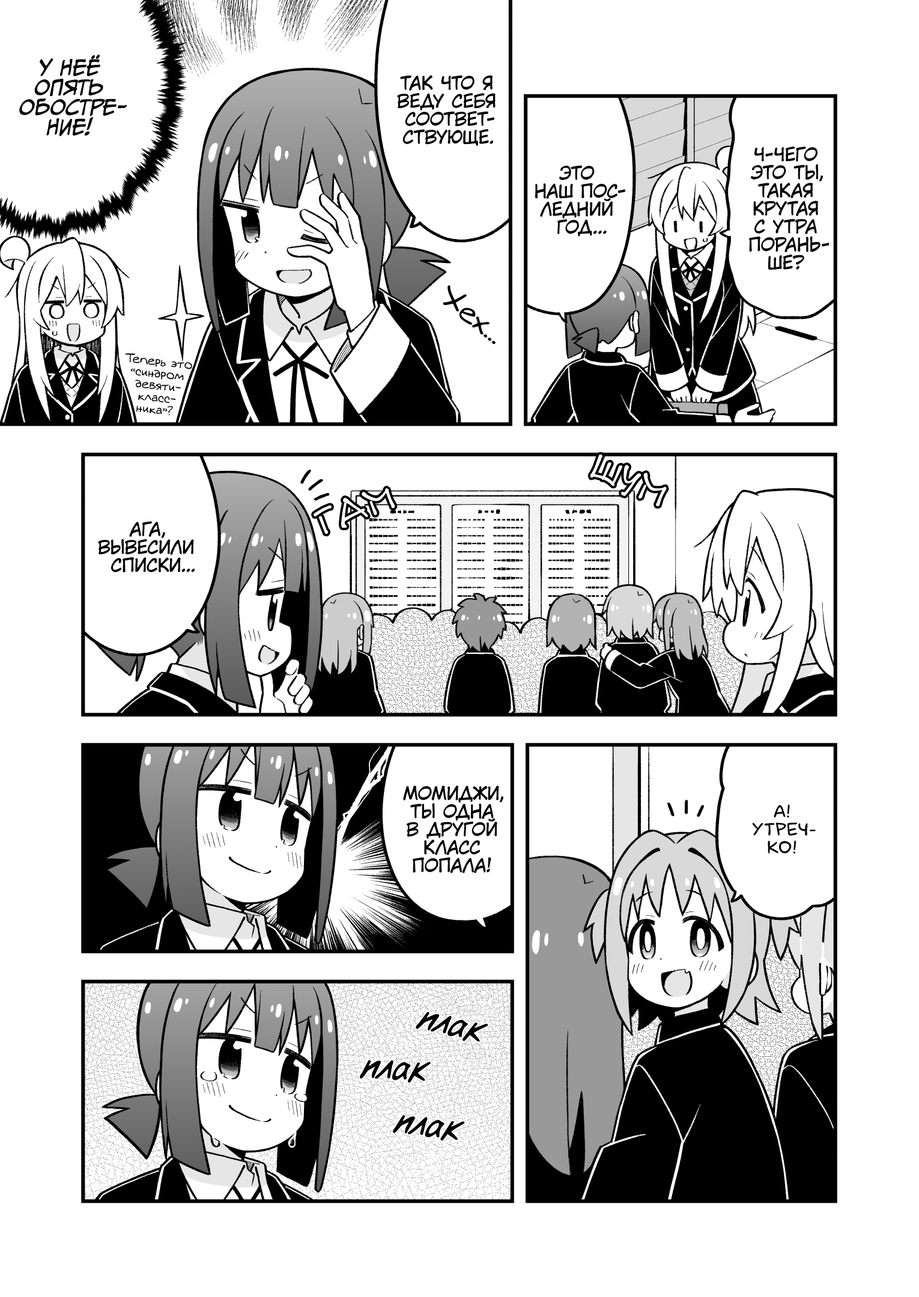
<style>
.page{position:relative;width:919px;height:1297px;background:#ffffff}
.page>*{position:absolute;margin:0}
.t1{font:19.8px "CCMeanwhile";color:#000000;text-transform:uppercase;font-style:italic}
.t2{font:18px "KuraiVoice2";color:#000000;text-transform:uppercase}
.t3{font:28.8px "v_Augie";color:#000000}
.t4{font:12px "v_Augie";color:#000000}
.t5{font:18px "laCartoonerie";color:#000000;text-transform:uppercase}
.t6{font:36px "v_CCDearDiary";color:#000000}
</style>
<div class="page">
<p class="t1" style="left:19px;top:55px;width:108px;height:81px;text-align:center">У неё<br>опять<br>обостре-<br>ние!</p>
<p class="t2" style="left:397px;top:75px;width:99px;height:71px;text-align:center">Так что я<br>веду себя<br>соответ-<br>ствующе.</p>
<p class="t2" style="left:749px;top:147px;width:81px;height:123px;text-align:center">Ч-чего<br>это ты,<br>такая<br>крутая<br>с утра<br>порань-<br>ше?</p>
<p class="t2" style="left:535px;top:165px;width:90px;height:72px;text-align:center">Это<br>наш пос-<br>ледний<br>год...</p>
<p class="t3" style="left:443px;top:285px;width:53px;height:59px;rotate:38deg">Хех...</p>
<p class="t4" style="left:125px;top:353px;width:67px;height:63px;text-align:center;rotate:6deg">Теперь это<br>«синдром<br>девяти-<br>класс-<br>ника»?</p>
<p class="t2" style="left:98px;top:521px;width:97px;height:51px;text-align:center">Ага,<br>вывесили<br>списки...</p>
<p class="t2" style="left:403px;top:786px;width:100px;height:87px;text-align:center">Момиджи,<br>Ты одна<br>в другой<br>класс<br>попала!</p>
<p class="t5" style="left:752px;top:805px;width:64px;height:49px;text-align:center">А!<br>Утреч-<br>ко!</p>
<p class="t6" style="left:416px;top:1012px;width:72px;height:30px;rotate:14deg">плак</p>
<p class="t6" style="left:360px;top:1060px;width:71px;height:23px;rotate:4deg">плак</p>
<p class="t6" style="left:393px;top:1115px;width:72px;height:26px;rotate:8deg">плак</p>
</div>
